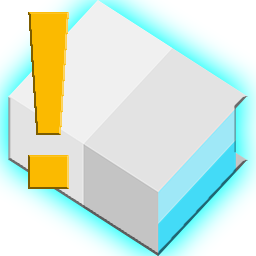
<style>
.page{position:relative;width:256px;height:256px;background:#e3e3e3}
.page>*{position:absolute;margin:0}
.t1{font:233.4px "AntonSC-Regular";color:#fbba00}
</style>
<div class="page">
<p class="t1" style="left:28px;top:12px;width:41px;height:177px">!</p>
</div>
